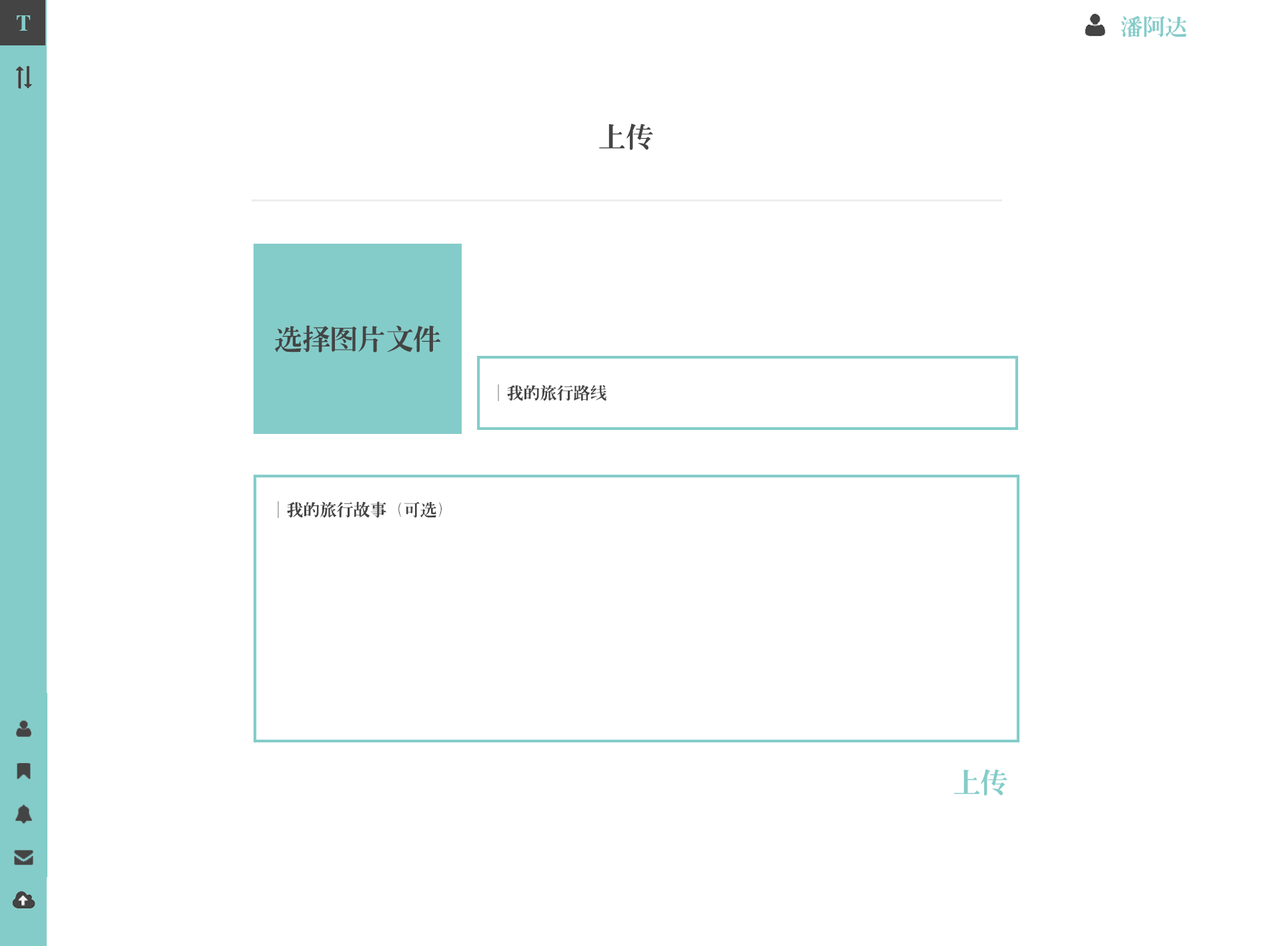
<style>
.page{position:relative;width:1261px;height:946px;background:#ffffff}
.page>*{position:absolute;margin:0}
.t1{font:22.2px "JQLaoSongJT";color:#84ccc9}
.t2{font:27.8px "JQLaoSongJT";color:#444444}
.t3{font:16.7px "JQLaoSongJT";color:#444444}
.t4{font:27.8px "JQLaoSongJT";color:#84ccc9}
</style>
<div class="page">
<p class="t1" style="left:17px;top:15px;width:14px;height:16px">T</p>
<p class="t1" style="left:1121px;top:16px;width:66px;height:21px">潘阿达</p>
<p class="t2" style="left:599px;top:123px;width:54px;height:27px">上传</p>
<p class="t2" style="left:275px;top:325px;width:166px;height:27px">选择图片文件</p>
<p class="t3" style="left:498px;top:384px;width:109px;height:17px">｜我的旅行路线</p>
<p class="t3" style="left:278px;top:500px;width:164px;height:18px">｜我的旅行故事（可选）</p>
<p class="t4" style="left:954px;top:769px;width:54px;height:26px">上传</p>
</div>
